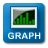
<style>
.page{position:relative;width:48px;height:48px;background:#ffffff}
.page>*{position:absolute;margin:0}
.t1{font:9px "ArialRoundedMTBold";letter-spacing:0.02em;color:#ffffff}
</style>
<div class="page">
<p class="t1" style="left:8px;top:32px;width:33px;height:7px">GRAPH</p>
</div>
